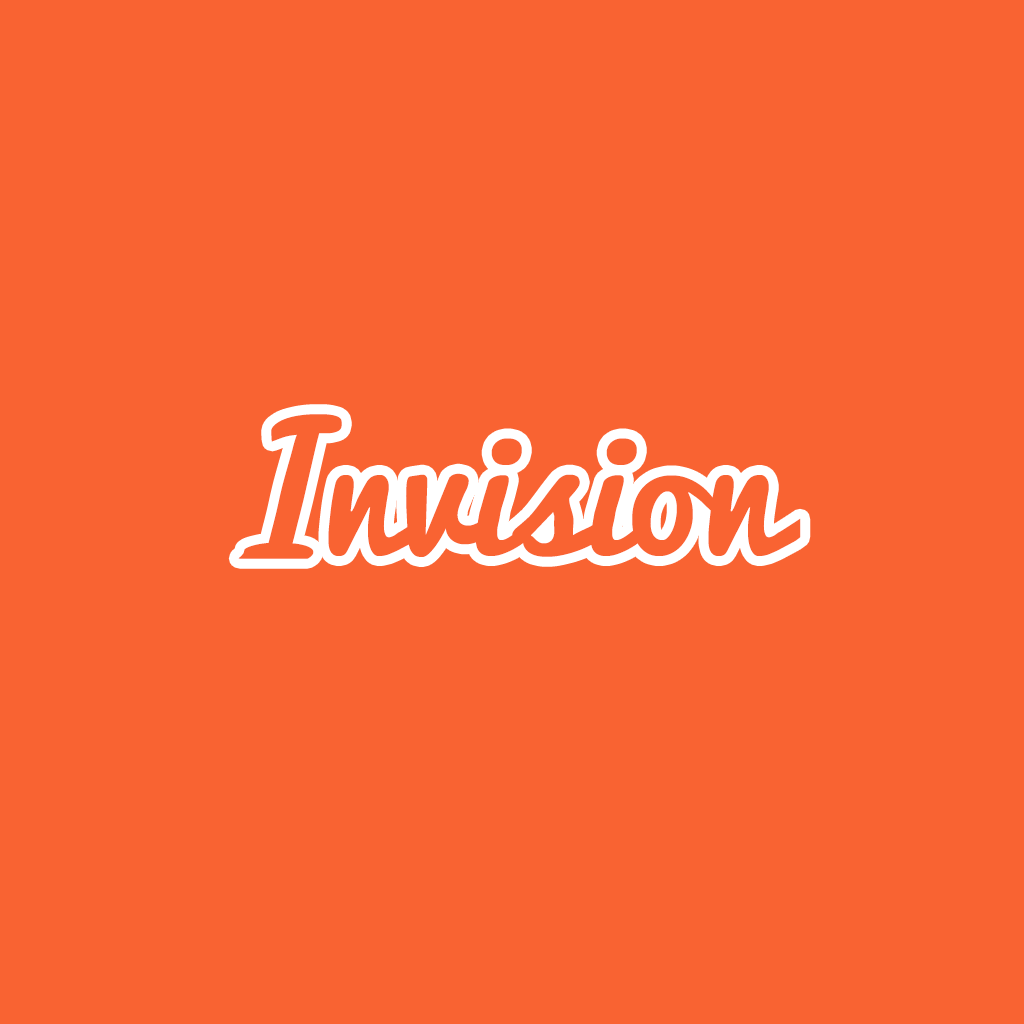
<style>
.page{position:relative;width:1024px;height:1024px;background:#f96332}
.page>*{position:absolute;margin:0}
.t1{font:168px "Pacifico";color:#f96332}
</style>
<div class="page">
<p class="t1" style="left:238px;top:414px;width:563px;height:145px">Invision</p>
</div>
